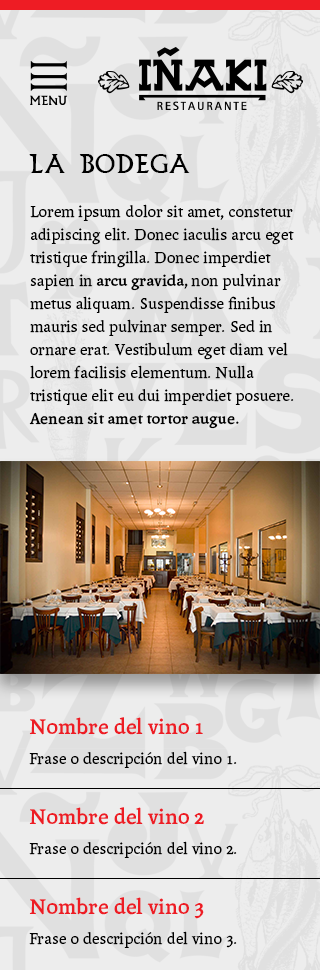
<style>
.page{position:relative;width:320px;height:970px;background:#ededed}
.page>*{position:absolute;margin:0}
.t1{font:27px "Bilbao";color:#000000}
.t2{font:17px/23px "AndralisNDOsF";color:#000000}
.t3{font:17px/23px "AndralisNDOsF-Bold";color:#000000}
.t4{font:23px/23px "AndralisNDOsF-Bold";color:#ed1c24}
</style>
<div class="page">
<p class="t1" style="left:29px;top:154px;width:161px;height:19px">LA BODEGA</p>
<p class="t2" style="left:29px;top:204px;width:265px;height:225px">Lorem ipsum dolor sit amet, constetur adipiscing elit. Donec iaculis arcu eget tristique fringilla. Donec imperdiet sapien in<span class="t3"> arcu gravida,</span> non pulvinar metus aliquam. Suspendisse finibus mauris sed pulvinar semper. Sed in ornare erat. Vestibulum eget diam vel lorem facilisis elementum. Nulla tristique elit eu dui imperdiet posuere. <span class="t3">Aenean sit amet tortor augue.</span></p>
<p class="t2" style="left:29px;top:717px;width:208px;height:231px"><span class="t4">Nombre del vino 1<br></span>Frase o descripción del vino 1.<br><br><span class="t4">Nombre del vino 2<br></span>Frase o descripción del vino 2.<br><br><span class="t4">Nombre del vino 3<br></span>Frase o descripción del vino 3.</p>
</div>
